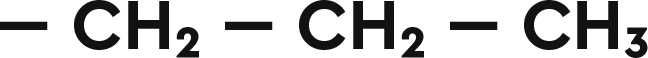
<style>
.page{position:relative;width:648px;height:58px;background:#ffffff}
.page>*{position:absolute;margin:0}
.t1{font:72px "CeraPro-Bold";color:#121212}
</style>
<div class="page">
<p class="t1" style="left:0px;top:0px;width:648px;height:58px">--- CH₂ --- CH₂ --- CH₃</p>
</div>
